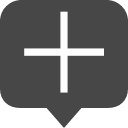
<style>
.page{position:relative;width:128px;height:128px;background:#484747}
.page>*{position:absolute;margin:0}
.t1{font:110px "KozGoPr6N-Regular";color:#fefefe}
</style>
<div class="page">
<p class="t1" style="left:24px;top:11px;width:80px;height:82px">＋</p>
</div>
